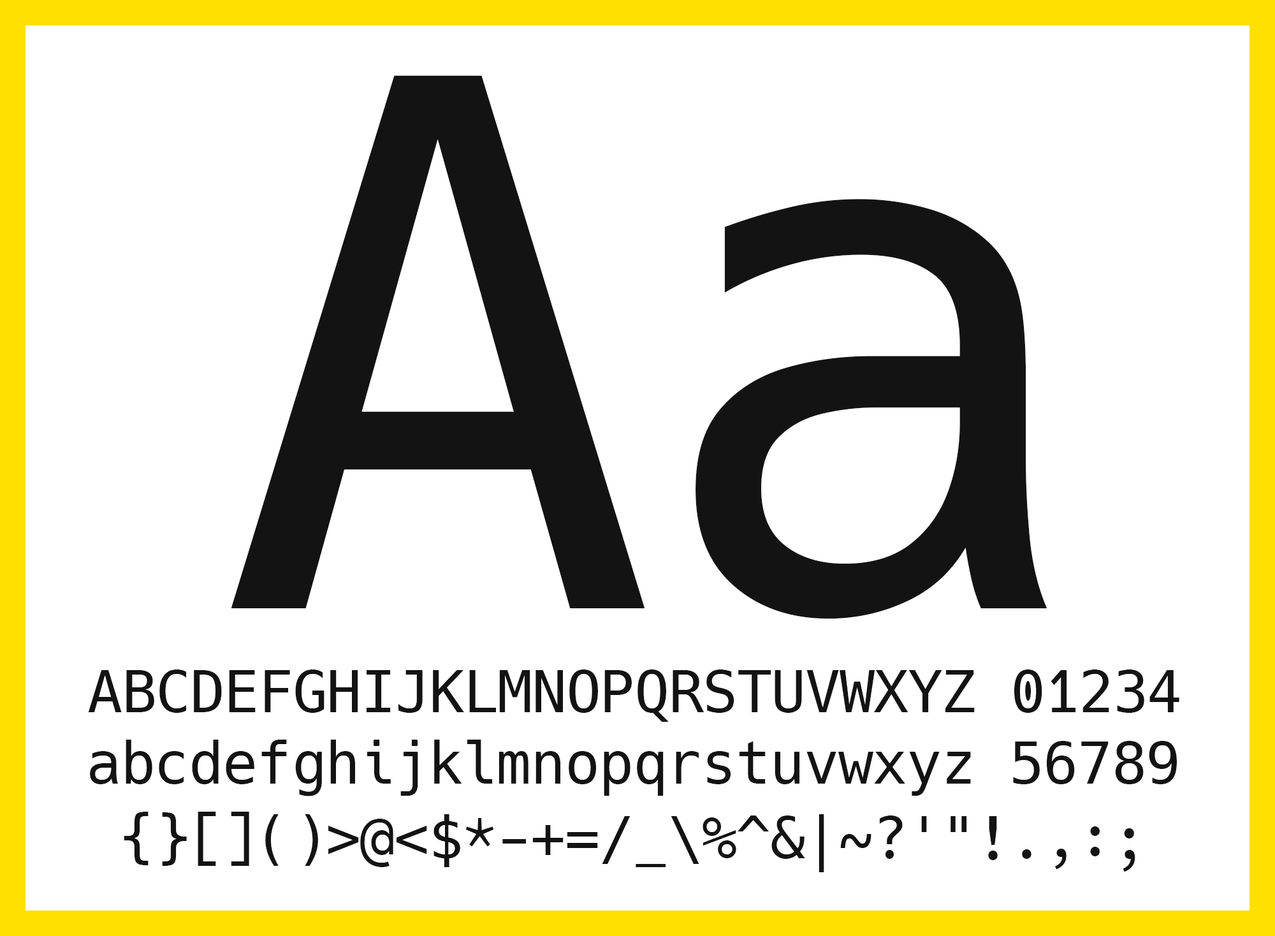
<style>
.page{position:relative;width:1275px;height:936px;background:#ffffff}
.page>*{position:absolute;margin:0}
.t1{font:730.2px "Hack-Regular";letter-spacing:-0.015em;color:#131313}
.t2{font:58.4px "Hack-Regular";letter-spacing:-0.015em;color:#131313}
</style>
<div class="page">
<p class="t1" style="left:231px;top:75px;width:816px;height:544px">Aa</p>
<p class="t2" style="left:88px;top:669px;width:1091px;height:52px">ABCDEFGHIJKLMNOPQRSTUVWXYZ 01234</p>
<p class="t2" style="left:90px;top:739px;width:1086px;height:57px">abcdefghijklmnopqrstuvwxyz 56789</p>
<p class="t2" style="left:124px;top:811px;width:1011px;height:61px">{}[]()&gt;@&lt;$*-+=/_\%^&amp;|~?'"!.,:;</p>
</div>
